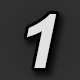
<style>
.page{position:relative;width:80px;height:80px}
.page>*{position:absolute;margin:0}
.t1{font:75px "Arial-BoldItalicMT";color:#e1e1e1}
</style>
<div class="page">
<p class="t1" style="left:27px;top:14px;width:30px;height:54px">1</p>
</div>
